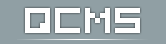
<style>
.page{position:relative;width:166px;height:44px;background:#909fa4}
.page>*{position:absolute;margin:0}
.t1{font:30px "04b08";color:#fefefe}
</style>
<div class="page">
<p class="t1" style="left:25px;top:8px;width:115px;height:25px">QCMS</p>
</div>
